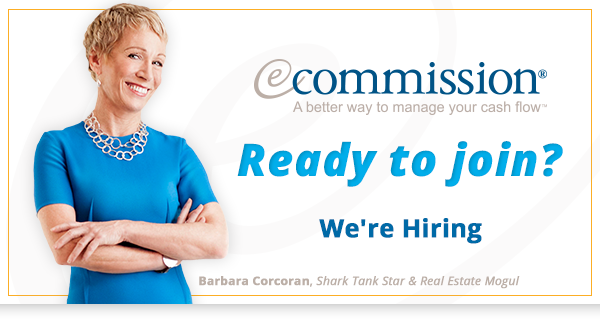
<style>
.page{position:relative;width:600px;height:320px;background:#ffffff}
.page>*{position:absolute;margin:0}
.t1{font:44.5px "OpenSans-ExtraboldItalic";color:#01aeeb;font-weight:bold}
.t2{font:25px "OpenSans-Bold";color:#006aa7;font-weight:bold}
.t3{font:12px "OpenSans-Italic";color:#bcafa7;font-weight:bold}
.t4{font:12px "OpenSans-Bold";color:#bcafa7;font-weight:bold}
.t5{font:12px "OpenSans";color:#bcafa7;font-weight:bold}
</style>
<div class="page">
<p class="t1" style="left:237px;top:141px;width:326px;height:46px">Ready to join?</p>
<p class="t2" style="left:319px;top:218px;width:163px;height:26px">We're Hiring</p>
<p class="t3" style="left:199px;top:276px;width:321px;height:13px"><span class="t4">Barbara Corcoran</span><span class="t5">, </span>Shark Tank Star &amp; Real Estate Mogul</p>
</div>
